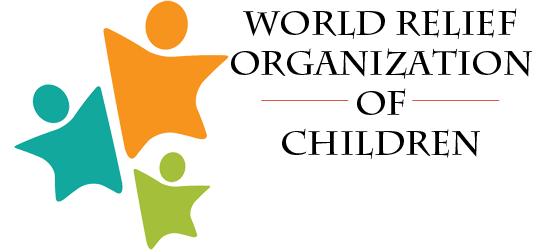
<style>
.page{position:relative;width:550px;height:250px;background:#ffffff}
.page>*{position:absolute;margin:0}
.t1{font:33.3px "CharlemagneStd-Bold";color:#000000}
.t2{font:16.7px "Verdana";letter-spacing:0.075em;color:#dc5849;scale:17.12 1}
.t3{font:16.7px "Verdana";color:#dc5849;scale:17.12 1}
</style>
<div class="page">
<p class="t1" style="left:231px;top:8px;width:301px;height:152px;text-align:center">World Relief<br>Organization<br>of<br>Children</p>
<p class="t2" style="left:261px;top:100px;width:239px;height:1px">-<span class="t3">-</span></p>
</div>
